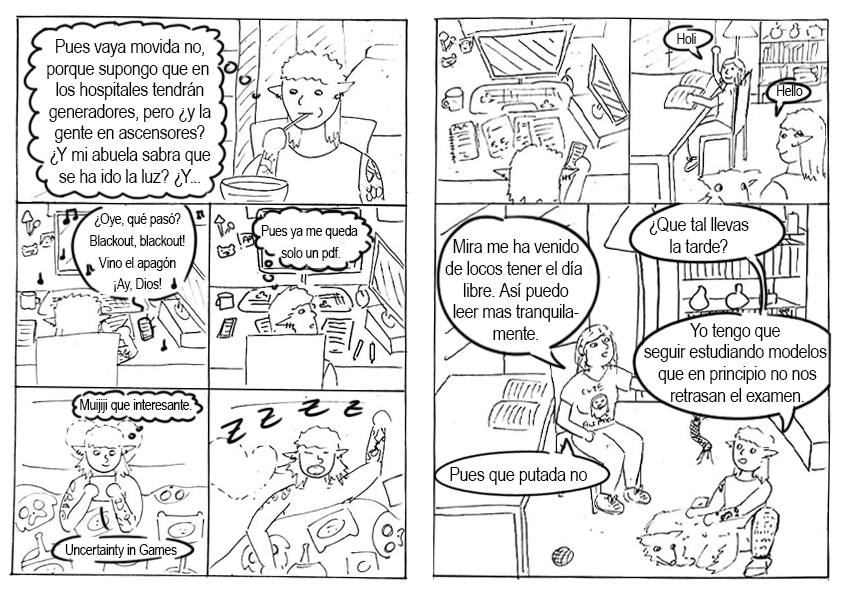
<style>
.page{position:relative;width:842px;height:595px;background:#ffffff}
.page>*{position:absolute;margin:0}
.t1{font:20px/21.6px "ArialNarrow";letter-spacing:-0.02em;color:#000000}
.t2{font:15px "ArialNarrow";letter-spacing:-0.02em;color:#000000}
.t3{font:15px/21.6px "ArialNarrow";letter-spacing:-0.02em;color:#000000}
.t4{font:20px "ArialNarrow";letter-spacing:-0.02em;color:#000000}
</style>
<div class="page">
<p class="t1" style="left:47px;top:39px;width:164px;height:148px;text-align:center">Pues vaya movida no,<br>porque supongo que en <br>los hospitales tendrán<br>generadores, pero ¿y la<br>gente en ascensores?<br>¿Y mi abuela sabra que<br>se ha ido la luz? ¿Y...</p>
<p class="t2" style="left:677px;top:33px;width:19px;height:11px">Holi</p>
<p class="t2" style="left:777px;top:85px;width:26px;height:11px">Hello</p>
<p class="t3" style="left:90px;top:213px;width:95px;height:79px;text-align:center">¿Oye, qué pasó?<br>Blackout, blackout!<br>Vino el apagón<br>¡Ay, Dios!</p>
<p class="t1" style="left:649px;top:217px;width:100px;height:36px;text-align:center">¿Que tal llevas<br>la tarde?</p>
<p class="t3" style="left:261px;top:225px;width:97px;height:36px;text-align:center">Pues ya me queda <br>solo un pdf.</p>
<p class="t1" style="left:445px;top:239px;width:137px;height:101px;text-align:center">Mira me ha venido<br>de locos tener el día <br>libre. Así puedo<br>leer mas tranquila-<br>mente.</p>
<p class="t1" style="left:644px;top:323px;width:183px;height:79px;text-align:center">Yo tengo que <br>seguir estudiando modelos <br>que en principio no nos<br>retrasan el examen.</p>
<p class="t2" style="left:80px;top:399px;width:112px;height:14px">Muijiji que interesante.</p>
<p class="t4" style="left:450px;top:467px;width:137px;height:18px">Pues que putada no</p>
<p class="t2" style="left:65px;top:544px;width:112px;height:14px">Uncertainty in Games</p>
</div>
